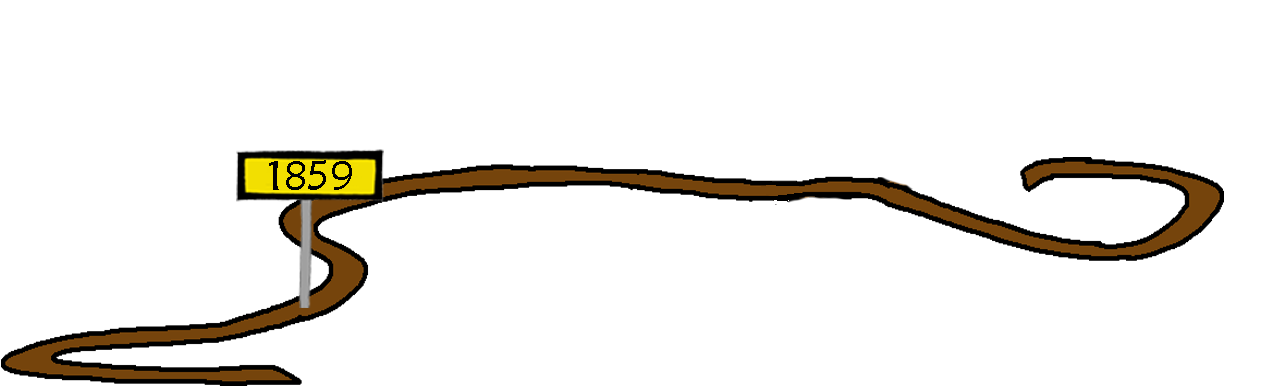
<style>
.page{position:relative;width:1278px;height:386px;background:#ffffff}
.page>*{position:absolute;margin:0}
.t1{font:41.7px "MaiandraGD-Regular";color:#000000}
</style>
<div class="page">
<p class="t1" style="left:269px;top:160px;width:83px;height:30px">1859</p>
</div>
